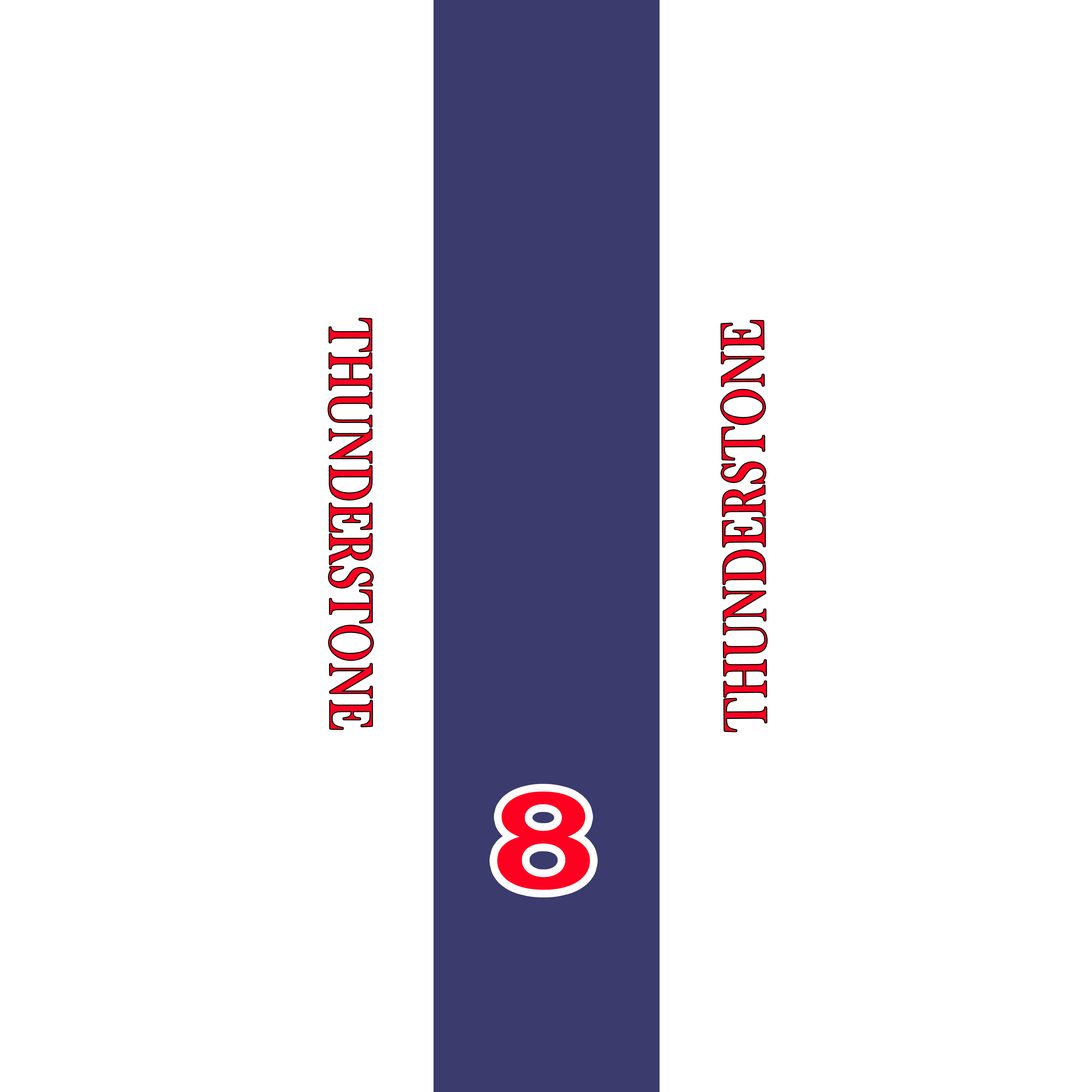
<style>
.page{position:relative;width:1092px;height:1092px;background:#ffffff}
.page>*{position:absolute;margin:0}
.t1{font:61.9px "BaskOldFace";color:#ff0021;font-weight:bold;scale:0.76 1}
.t2{font:133.7px "ArialRoundedMTBold";color:#ff0021;font-weight:bold;scale:1.36 1}
</style>
<div class="page">
<p class="t1" style="left:329px;top:318px;width:44px;height:411px;rotate:90deg">THUNDERSTONE</p>
<p class="t1" style="left:721px;top:321px;width:46px;height:410px;rotate:-90deg">THUNDERSTONE</p>
<p class="t2" style="left:497px;top:791px;width:93px;height:99px">8</p>
</div>
